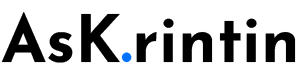
<style>
.page{position:relative;width:300px;height:82px;background:#ffffff}
.page>*{position:absolute;margin:0}
.t1{font:65.3px "JosefinSans-Bold";color:#000000}
.t2{font:65.3px "JosefinSans-Bold";color:#0072ff}
</style>
<div class="page">
<p class="t1" style="left:1px;top:12px;width:295px;height:51px">AsK<span class="t2">.</span>rintin</p>
</div>
